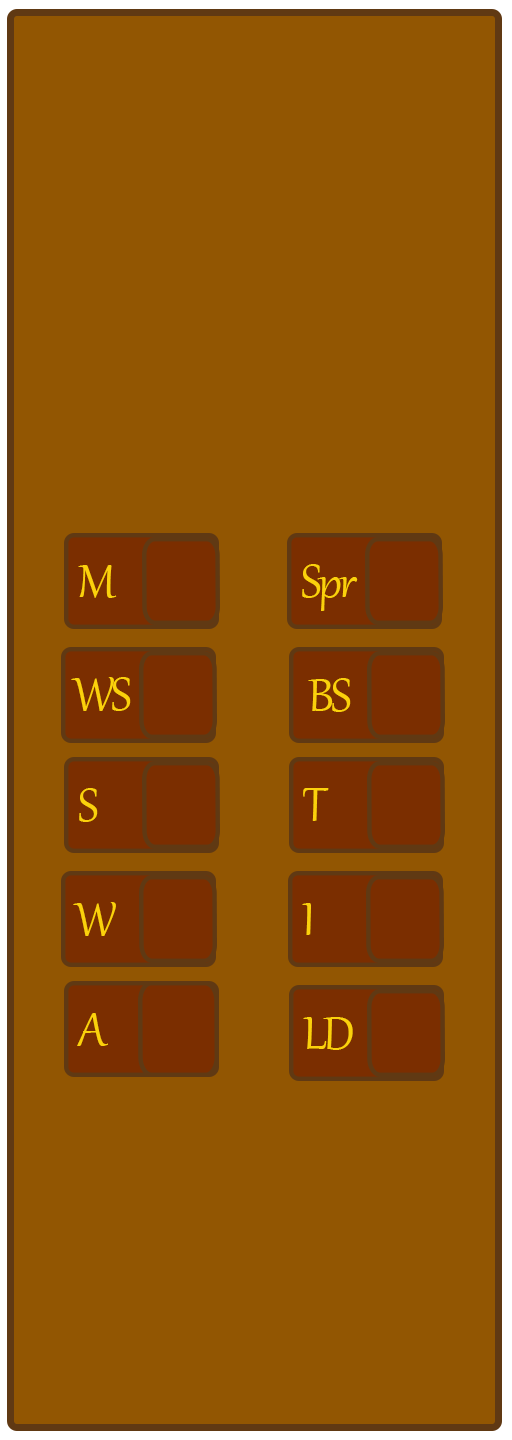
<style>
.page{position:relative;width:512px;height:1440px;background:#925602}
.page>*{position:absolute;margin:0}
.t1{font:57.9px "Gabriola";letter-spacing:-0.05em;color:#fbd10c}
</style>
<div class="page">
<p class="t1" style="left:78px;top:565px;width:39px;height:33px">M</p>
<p class="t1" style="left:302px;top:564px;width:56px;height:47px">Spr</p>
<p class="t1" style="left:71px;top:677px;width:60px;height:34px">WS</p>
<p class="t1" style="left:308px;top:678px;width:43px;height:34px">BS</p>
<p class="t1" style="left:79px;top:788px;width:19px;height:34px">S</p>
<p class="t1" style="left:303px;top:788px;width:26px;height:33px">T</p>
<p class="t1" style="left:73px;top:902px;width:43px;height:34px">W</p>
<p class="t1" style="left:302px;top:903px;width:9px;height:32px">I</p>
<p class="t1" style="left:77px;top:1013px;width:31px;height:33px">A</p>
<p class="t1" style="left:303px;top:1017px;width:50px;height:33px">LD</p>
</div>
